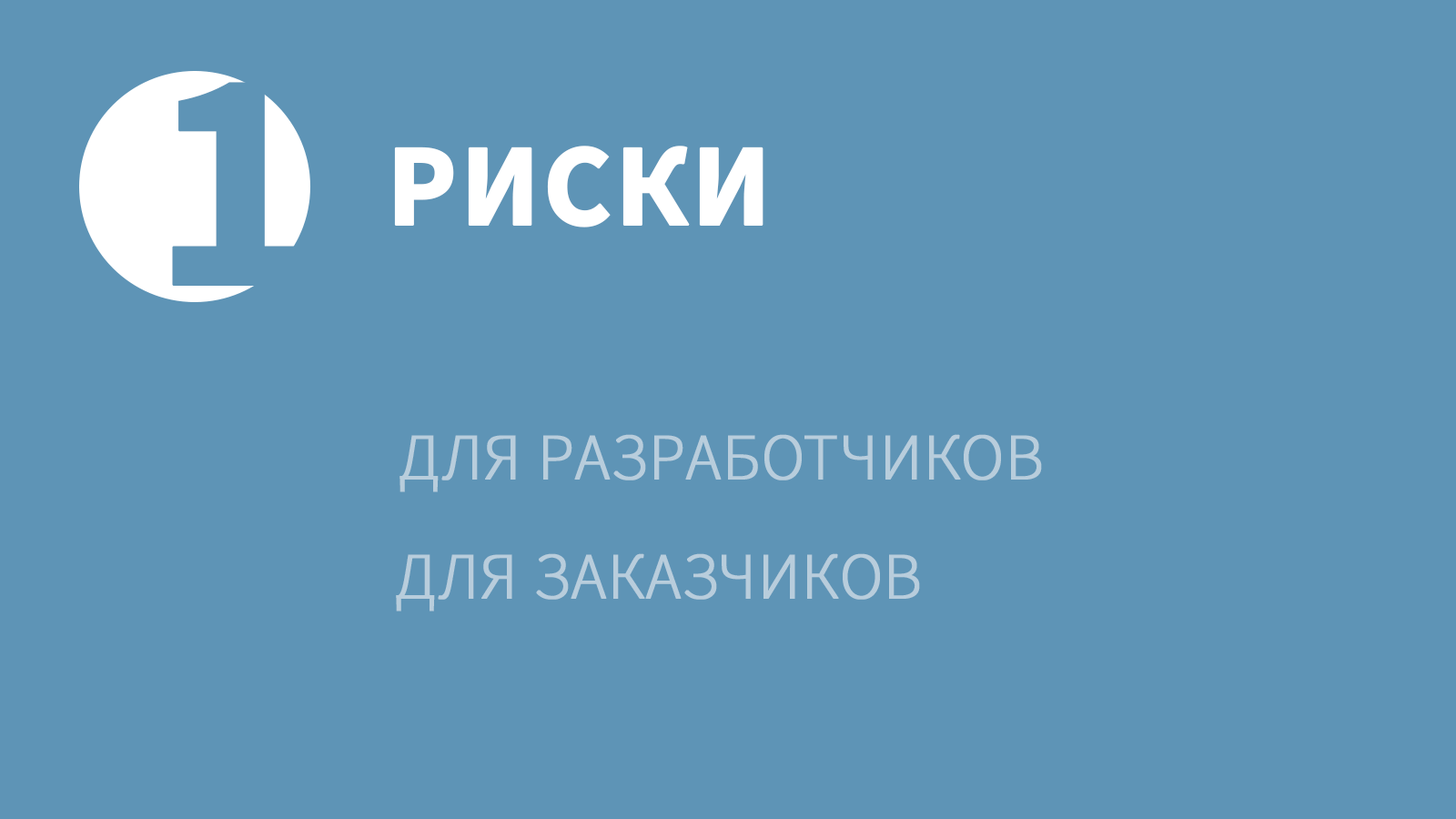
<style>
.page{position:relative;width:1456px;height:819px;background:#5e94b6}
.page>*{position:absolute;margin:0}
.t1{font:317.8px "SourceSansPro-Bold";color:#5e94b6;text-transform:uppercase;font-weight:bold}
.t2{font:117.8px "SourceSansPro-Bold";color:#ffffff;text-transform:uppercase;font-weight:bold}
.t3{font:65.5px "SourceSansPro-Light";color:#b8cddc;text-transform:uppercase;font-weight:bold}
</style>
<div class="page">
<p class="t1" style="left:172px;top:82px;width:131px;height:204px">1</p>
<p class="t2" style="left:394px;top:146px;width:369px;height:81px">Риски</p>
<p class="t3" style="left:399px;top:434px;width:643px;height:58px">Для разработчиков</p>
<p class="t3" style="left:396px;top:553px;width:524px;height:59px">Для Заказчиков</p>
</div>
